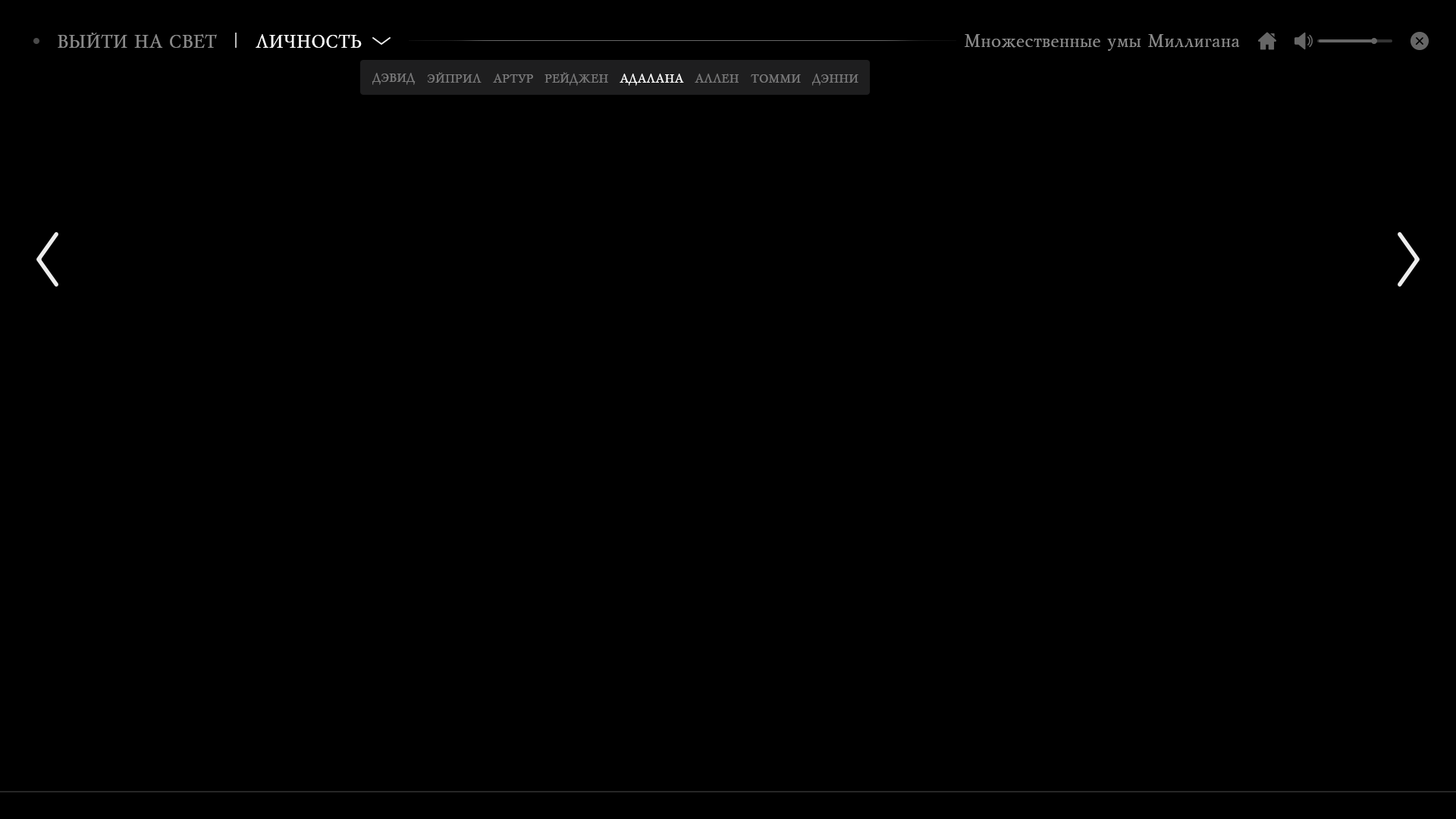
<style>
.page{position:relative;width:1456px;height:819px;background:#000000}
.page>*{position:absolute;margin:0}
.t1{font:18.2px "MyslCyrillic";color:#8b8b8b}
.t2{font:18.2px "MyslCyrillic";color:#ffffff}
.t3{font:12.1px "MyslCyrillic";color:#787879}
.t4{font:12.1px "MyslCyrillic";color:#ffffff}
</style>
<div class="page">
<p class="t1" style="left:58px;top:33px;width:159px;height:15px">ВЫЙТИ НА СВЕТ</p>
<p class="t2" style="left:256px;top:34px;width:106px;height:14px">ЛИЧНОСТЬ</p>
<p class="t1" style="left:965px;top:34px;width:275px;height:17px">Множественные умы Миллигана</p>
<p class="t3" style="left:372px;top:73px;width:44px;height:12px">ДЭВИД</p>
<p class="t3" style="left:427px;top:72px;width:55px;height:11px">ЭЙПРИЛ</p>
<p class="t3" style="left:493px;top:74px;width:40px;height:9px">АРТУР</p>
<p class="t3" style="left:544px;top:72px;width:64px;height:14px">РЕЙДЖЕН</p>
<p class="t4" style="left:620px;top:74px;width:64px;height:12px">АДАЛАНА</p>
<p class="t3" style="left:695px;top:74px;width:44px;height:9px">АЛЛЕН</p>
<p class="t3" style="left:751px;top:74px;width:50px;height:9px">ТОММИ</p>
<p class="t3" style="left:811px;top:74px;width:47px;height:12px">ДЭННИ</p>
</div>
